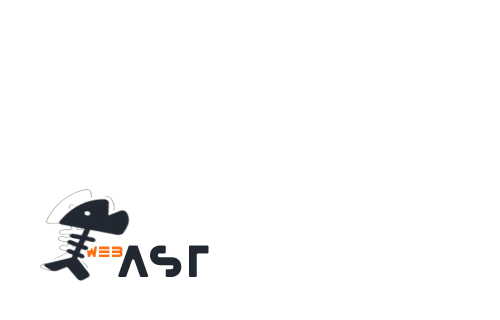
<style>
.page{position:relative;width:500px;height:320px;background:#ffffff}
.page>*{position:absolute;margin:0}
.t1{font:36px "IchijiOne";color:#222831}
</style>
<div class="page">
<p class="t1" style="left:118px;top:245px;width:31px;height:32px">a</p>
<p class="t1" style="left:150px;top:245px;width:32px;height:32px">s</p>
<p class="t1" style="left:189px;top:245px;width:20px;height:32px">t</p>
</div>
